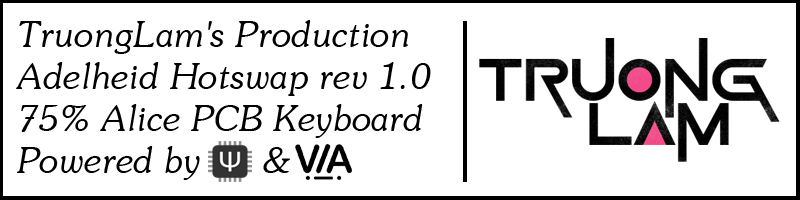
<style>
.page{position:relative;width:800px;height:200px;background:#ffffff}
.page>*{position:absolute;margin:0}
.t1{font:35px "UVNSaigonItalic";color:#000000}
</style>
<div class="page">
<p class="t1" style="left:16px;top:20px;width:415px;height:160px">TruongLam's Production<br>Adelheid Hotswap rev 1.0<br>75% Alice PCB Keyboard<br>Powered by      &amp;</p>
</div>
